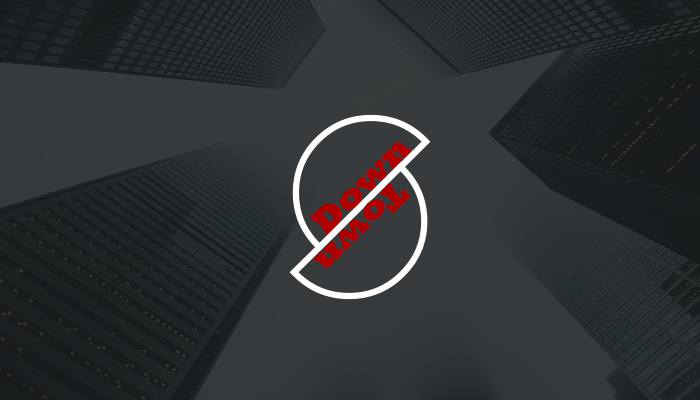
<style>
.page{position:relative;width:700px;height:400px}
.page>*{position:absolute;margin:0}
.t1{font:36px "Rockwell-ExtraBold";color:#ae0000}
</style>
<div class="page">
<p class="t1" style="left:309px;top:142px;width:103px;height:93px;rotate:-45deg">Down</p>
<p class="t1" style="left:313px;top:182px;width:98px;height:85px;rotate:135deg">Town</p>
</div>
